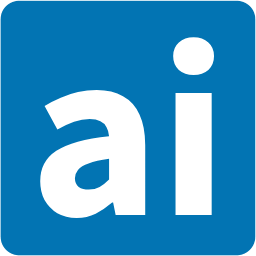
<style>
.page{position:relative;width:256px;height:256px;background:#0274b3}
.page>*{position:absolute;margin:0}
.t1{font:246px "SourceSans3ExtraLight-Bold";color:#ffffff}
</style>
<div class="page">
<p class="t1" style="left:40px;top:37px;width:175px;height:181px">ai</p>
</div>
